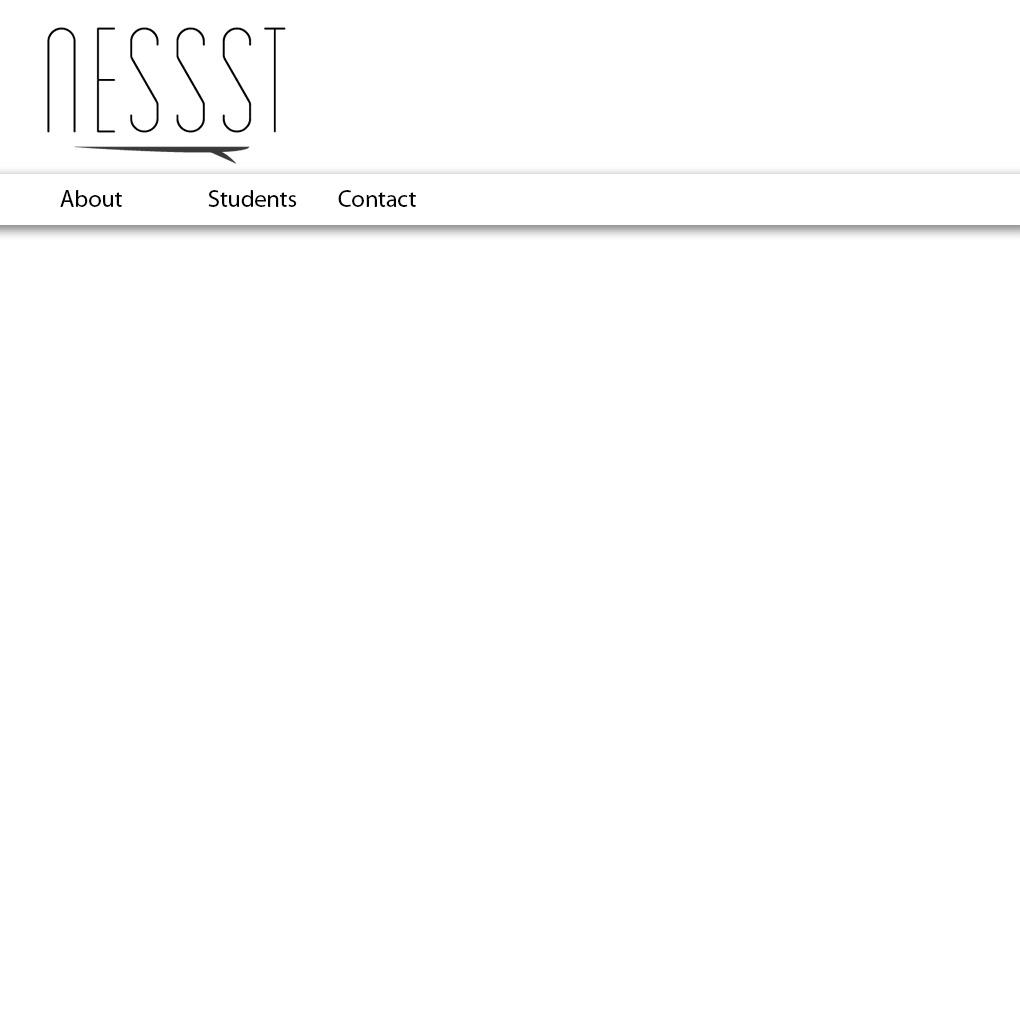
<style>
.page{position:relative;width:1020px;height:1020px;background:#ffffff}
.page>*{position:absolute;margin:0}
.t1{font:24px "MyriadPro-Regular";color:#000000}
</style>
<div class="page">
<p class="t1" style="left:60px;top:190px;width:62px;height:17px">About</p>
<p class="t1" style="left:208px;top:190px;width:89px;height:17px">Students</p>
<p class="t1" style="left:338px;top:190px;width:78px;height:17px">Contact</p>
</div>
